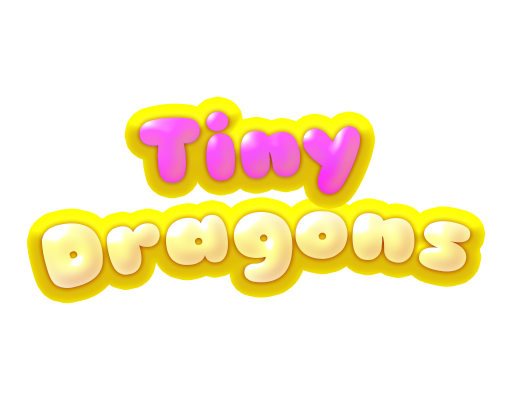
<style>
.page{position:relative;width:508px;height:393px;background:#ffffff}
.page>*{position:absolute;margin:0}
.t1{font:88.8px "Sniglet"}
</style>
<div class="page">
<p class="t1" style="left:139px;top:111px;width:221px;height:83px;rotate:-3deg">Tiny</p>
<p class="t1" style="left:139px;top:111px;width:221px;height:83px;rotate:-3deg">Tiny</p>
<p class="t1" style="left:42px;top:211px;width:429px;height:78px;rotate:-3deg">Dragons</p>
<p class="t1" style="left:42px;top:211px;width:429px;height:77px;rotate:-3deg">Dragons</p>
</div>
